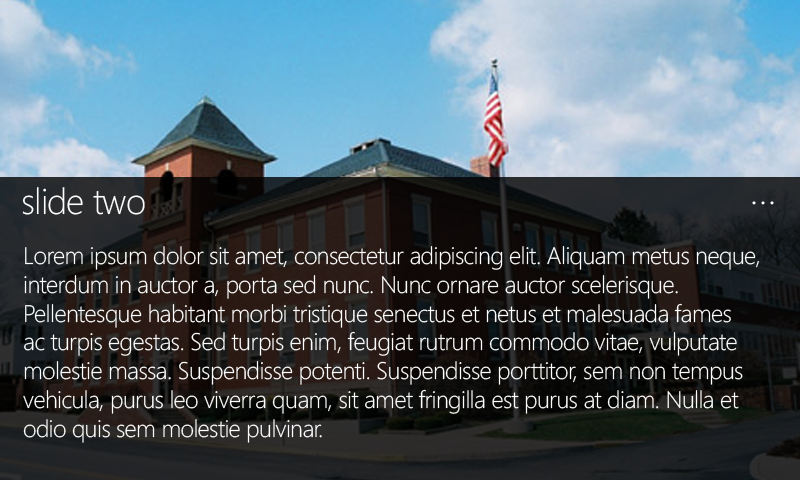
<style>
.page{position:relative;width:800px;height:480px}
.page>*{position:absolute;margin:0}
.t1{font:36px "SegoeWP-Light";letter-spacing:-0.025em;color:#ffffff}
.t2{font:24px "SegoeWP-Light";letter-spacing:-0.025em;color:#ffffff}
</style>
<div class="page">
<p class="t1" style="left:22px;top:187px;width:123px;height:28px">slide two</p>
<p class="t2" style="left:23px;top:246px;width:737px;height:197px">Lorem ipsum dolor sit amet, consectetur adipiscing elit. Aliquam metus neque, <br>interdum in auctor a, porta sed nunc. Nunc ornare auctor scelerisque. <br>Pellentesque habitant morbi tristique senectus et netus et malesuada fames <br>ac turpis egestas. Sed turpis enim, feugiat rutrum commodo vitae, vulputate <br>molestie massa. Suspendisse potenti. Suspendisse porttitor, sem non tempus <br>vehicula, purus leo viverra quam, sit amet fringilla est purus at diam. Nulla et <br>odio quis sem molestie pulvinar.</p>
</div>
